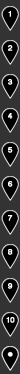
<style>
.page{position:relative;width:20px;height:374px;background:#333333}
.page>*{position:absolute;margin:0}
.t1{font:8px/34px "Helvetica-Bold";letter-spacing:-0.035em;color:#ffffff;text-transform:uppercase;font-weight:bold}
</style>
<div class="page">
<p class="t1" style="left:6px;top:11px;width:9px;height:312px;text-align:center">1<br>2<br>3<br>4<br>5<br>6<br>7<br>8<br>9<br>10</p>
</div>
